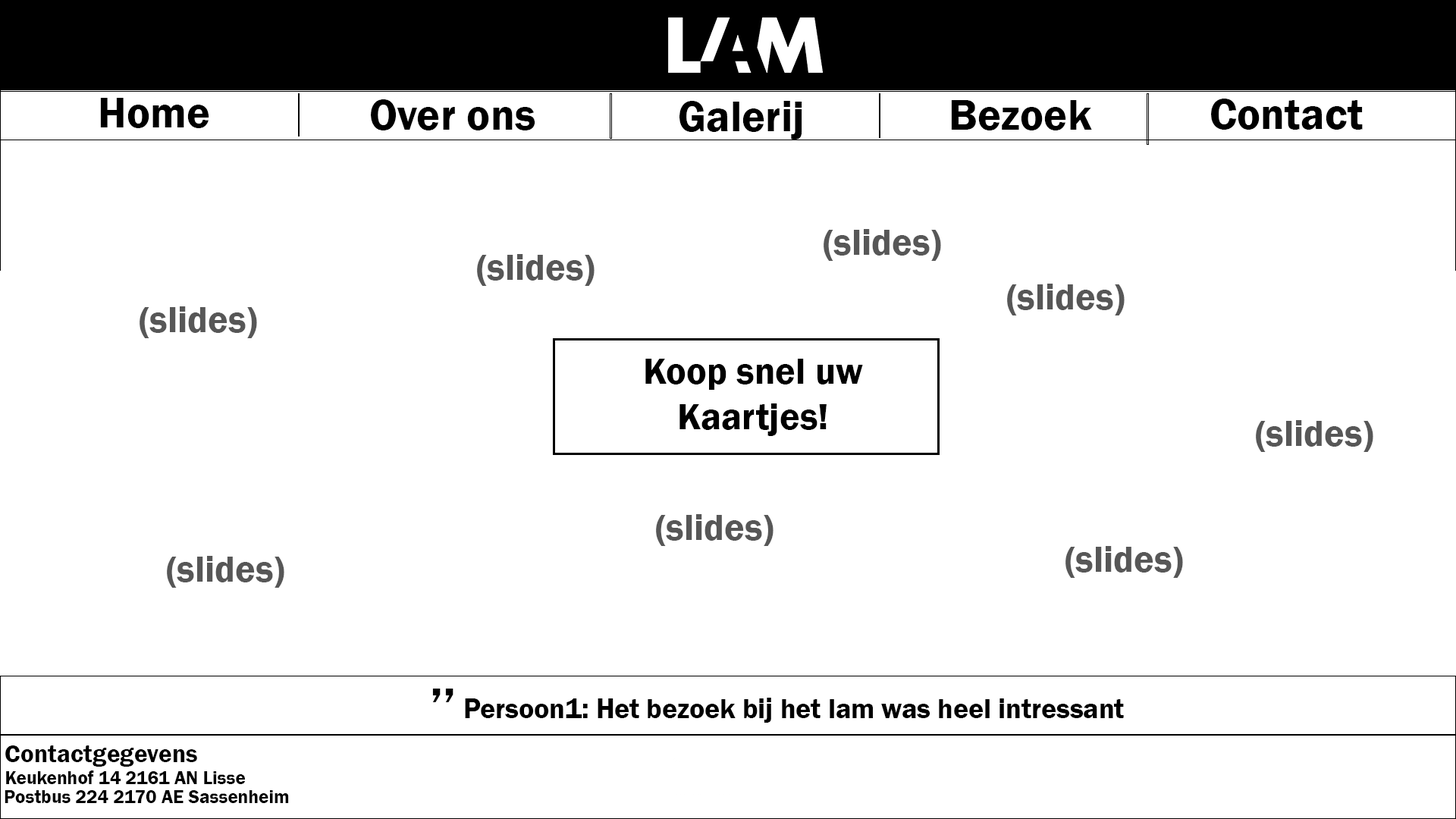
<style>
.page{position:relative;width:1456px;height:819px;background:#ffffff}
.page>*{position:absolute;margin:0}
.t1{font:44.2px "FranklinGothic-Demi";color:#000000}
.t2{font:37.9px "FranklinGothic-Demi";color:#575757}
.t3{font:37.9px "FranklinGothic-Demi";color:#000000}
.t4{font:50.6px "FranklinGothic-Demi";color:#000000}
.t5{font:28.4px "FranklinGothic-Demi";color:#000000}
.t6{font:25.3px "FranklinGothic-Demi";color:#000000}
.t7{font:19px "FranklinGothic-Demi";color:#000000}
</style>
<div class="page">
<p class="t1" style="left:100px;top:98px;width:109px;height:30px">Home</p>
<p class="t1" style="left:371px;top:99px;width:164px;height:31px">Over ons</p>
<p class="t1" style="left:679px;top:101px;width:123px;height:39px">Galerij</p>
<p class="t1" style="left:951px;top:100px;width:141px;height:30px">Bezoek</p>
<p class="t1" style="left:1211px;top:99px;width:152px;height:31px">Contact</p>
<p class="t2" style="left:824px;top:229px;width:117px;height:32px">(slides)</p>
<p class="t2" style="left:477px;top:254px;width:118px;height:32px">(slides)</p>
<p class="t2" style="left:1007px;top:284px;width:118px;height:31px">(slides)</p>
<p class="t2" style="left:140px;top:306px;width:117px;height:32px">(slides)</p>
<p class="t3" style="left:645px;top:359px;width:218px;height:77px;text-align:center">Koop snel uw<br>Kaartjes!</p>
<p class="t2" style="left:1256px;top:420px;width:117px;height:32px">(slides)</p>
<p class="t2" style="left:656px;top:514px;width:117px;height:32px">(slides)</p>
<p class="t2" style="left:1065px;top:546px;width:118px;height:32px">(slides)</p>
<p class="t2" style="left:167px;top:556px;width:117px;height:32px">(slides)</p>
<p class="t4" style="left:432px;top:689px;width:21px;height:13px">’’</p>
<p class="t5" style="left:465px;top:698px;width:659px;height:25px">Persoon1: Het bezoek bij het lam was heel intressant</p>
<p class="t6" style="left:5px;top:745px;width:192px;height:22px">Contactgegevens</p>
<p class="t7" style="left:6px;top:770px;width:239px;height:14px">Keukenhof 14 2161 AN Lisse</p>
<p class="t7" style="left:5px;top:790px;width:284px;height:13px">Postbus 224 2170 AE Sassenheim</p>
</div>
